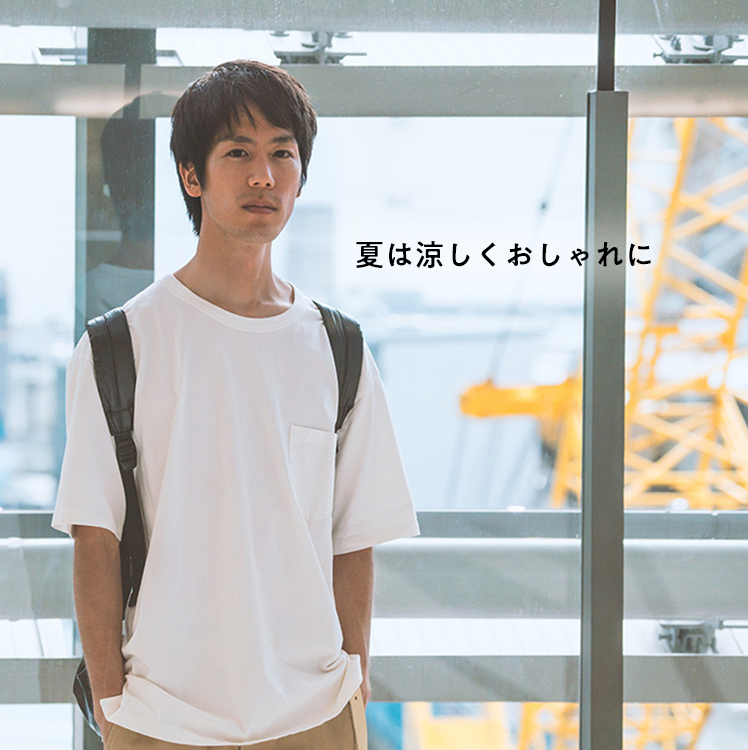
<style>
.page{position:relative;width:748px;height:750px}
.page>*{position:absolute;margin:0}
.t1{font:30px "PA1GothicStd-Medium";color:#000000}
</style>
<div class="page">
<p class="t1" style="left:356px;top:241px;width:295px;height:27px">夏は涼しくおしゃれに</p>
</div>
